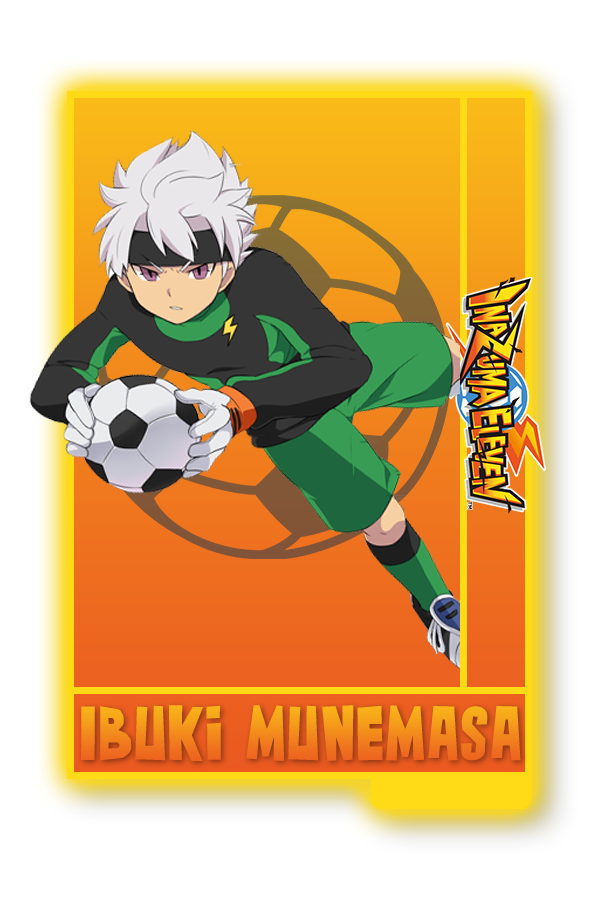
<style>
.page{position:relative;width:600px;height:900px;background:#ffffff}
.page>*{position:absolute;margin:0}
.t1{font:79.9px "TTG-Bold"}
</style>
<div class="page">
<p class="t1" style="left:81px;top:705px;width:440px;height:56px">Ibuki Munemasa</p>
</div>
